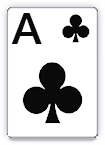
<style>
.page{position:relative;width:105px;height:145px;background:#ffffff}
.page>*{position:absolute;margin:0}
.t1{font:44px "HelveticaNeue-Medium";color:#0a0a0a;text-transform:uppercase}
</style>
<div class="page">
<p class="t1" style="left:11px;top:13px;width:31px;height:31px">A</p>
</div>
